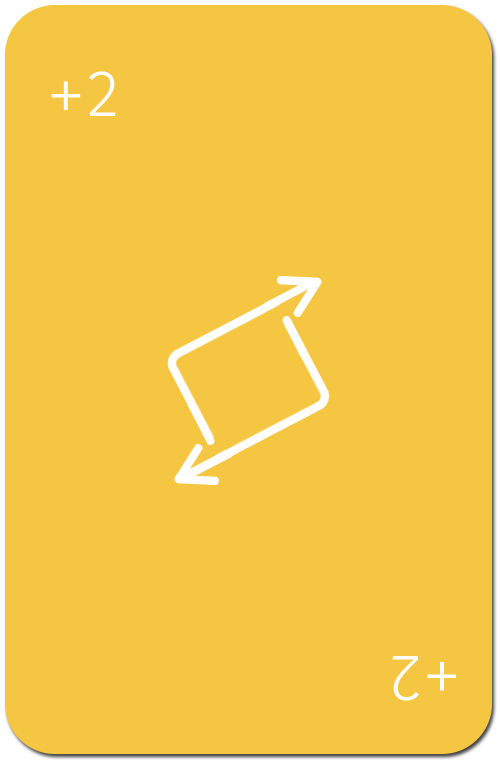
<style>
.page{position:relative;width:500px;height:770px;background:#f5c642}
.page>*{position:absolute;margin:0}
.t1{font:63px "FiraCode-Light";color:#ffffff}
</style>
<div class="page">
<p class="t1" style="left:51px;top:71px;width:65px;height:45px">+2</p>
<p class="t1" style="left:392px;top:656px;width:64px;height:45px;rotate:180deg">+2</p>
</div>
